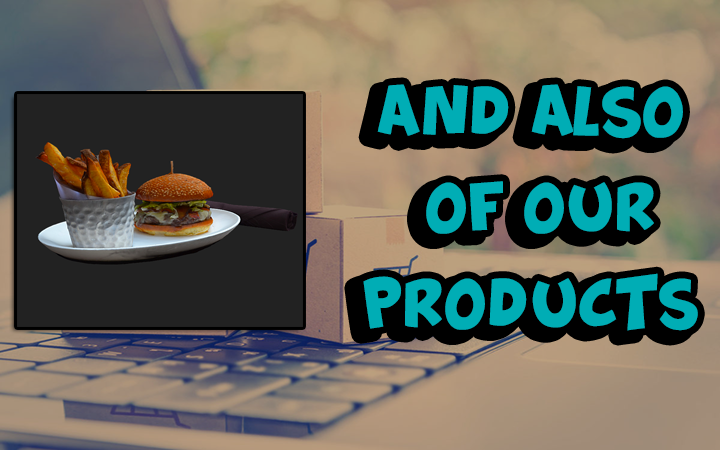
<style>
.page{position:relative;width:720px;height:450px}
.page>*{position:absolute;margin:0}
.t1{font:9.6px "Splatch";color:#00adb5;scale:1.13 1}
</style>
<div class="page">
<p class="t1" style="left:363px;top:84px;width:335px;height:247px;text-align:center">AND ALSO<br><br> OF OUR <br><br>PRODUCTS</p>
</div>
